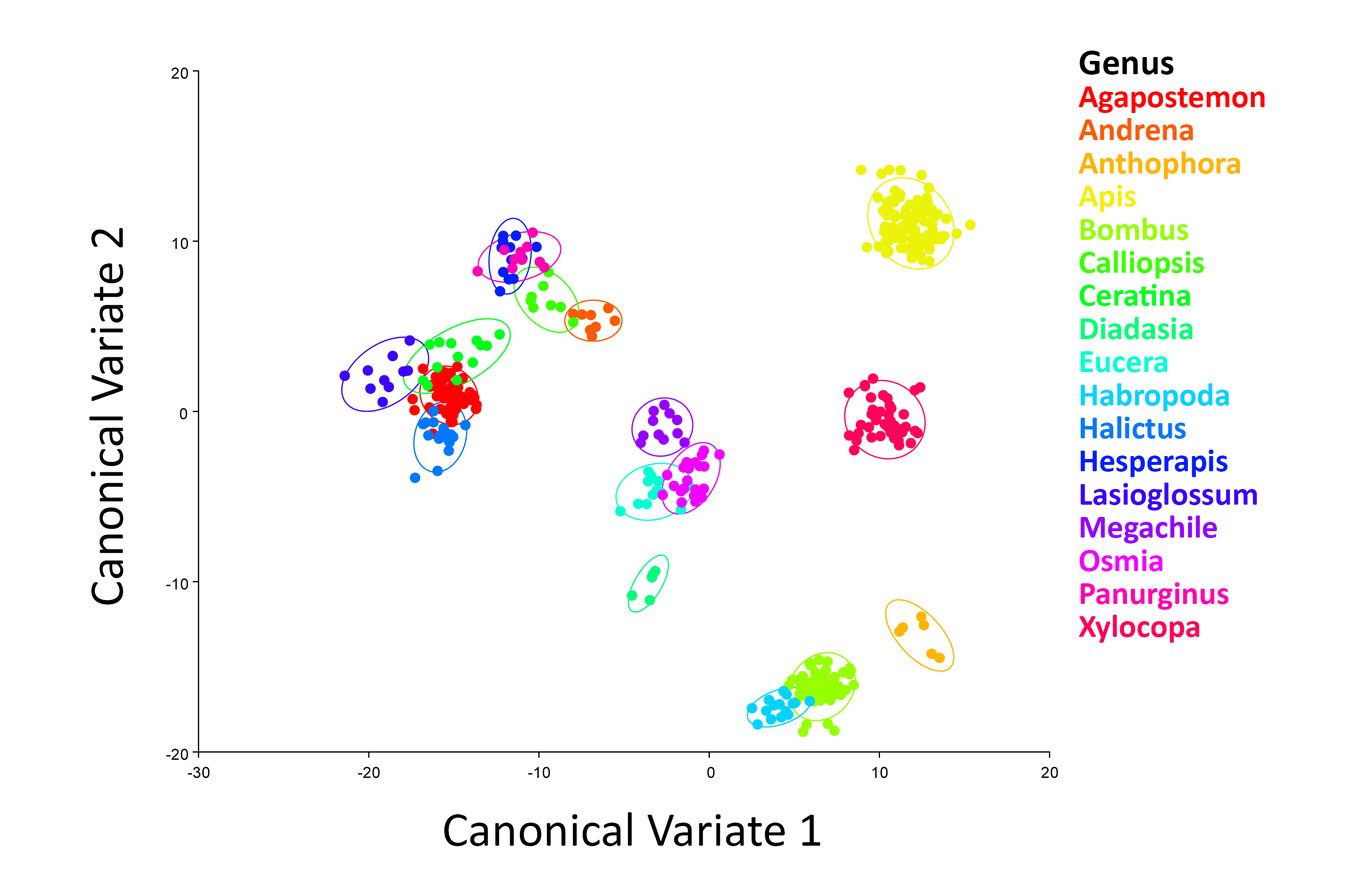
<style>
.page{position:relative;width:1348px;height:885px;background:#ffffff}
.page>*{position:absolute;margin:0}
.t1{font:32.7px/33.1px "Calibri-Bold";color:#3c00ff}
.t2{font:36.8px/33.1px "Calibri-Bold";color:#000000}
.t3{font:32.7px/33.1px "Calibri-Bold";color:#ff0000}
.t4{font:32.7px/33.1px "Calibri-Bold";color:#ff5a00}
.t5{font:32.7px/33.1px "Calibri-Bold";color:#ffb400}
.t6{font:32.7px/33.1px "Calibri-Bold";color:#f0ff00}
.t7{font:32.7px/33.1px "Calibri-Bold";color:#96ff00}
.t8{font:32.7px/33.1px "Calibri-Bold";color:#3cff00}
.t9{font:32.7px/33.1px "Calibri-Bold";color:#00ff1e}
.t10{font:32.7px/33.1px "Calibri-Bold";color:#00ff78}
.t11{font:32.7px/33.1px "Calibri-Bold";color:#00ffd2}
.t12{font:32.7px/33.1px "Calibri-Bold";color:#00d2ff}
.t13{font:32.7px/33.1px "Calibri-Bold";color:#0078ff}
.t14{font:32.7px/33.1px "Calibri-Bold";color:#001eff}
.t15{font:32.7px/33.1px "Calibri-Bold";color:#9600ff}
.t16{font:32.7px/33.1px "Calibri-Bold";color:#f000ff}
.t17{font:32.7px/33.1px "Calibri-Bold";color:#ff00b4}
.t18{font:32.7px/33.1px "Calibri-Bold";color:#ff005a}
.t19{font:49.1px "Calibri";color:#000000}
</style>
<div class="page">
<p class="t1" style="left:1079px;top:51px;width:186px;height:591px"><span class="t2">Genus<br></span><span class="t3">Agapostemon<br></span><span class="t4">Andrena<br></span><span class="t5">Anthophora<br></span><span class="t6">Apis<br></span><span class="t7">Bombus<br></span><span class="t8">Calliopsis<br></span><span class="t9">Ceratina<br></span><span class="t10">Diadasia<br></span><span class="t11">Eucera<br></span><span class="t12">Habropoda<br></span><span class="t13">Halictus<br></span><span class="t14">Hesperapis<br></span>Lasioglossum<br><span class="t15">Megachile<br></span><span class="t16">Osmia<br></span><span class="t17">Panurginus<br></span><span class="t18">Xylocopa</span></p>
<p class="t19" style="left:89px;top:228px;width:34px;height:377px;rotate:-90deg">Canonical Variate 2</p>
<p class="t19" style="left:444px;top:812px;width:377px;height:34px">Canonical Variate 1</p>
</div>
